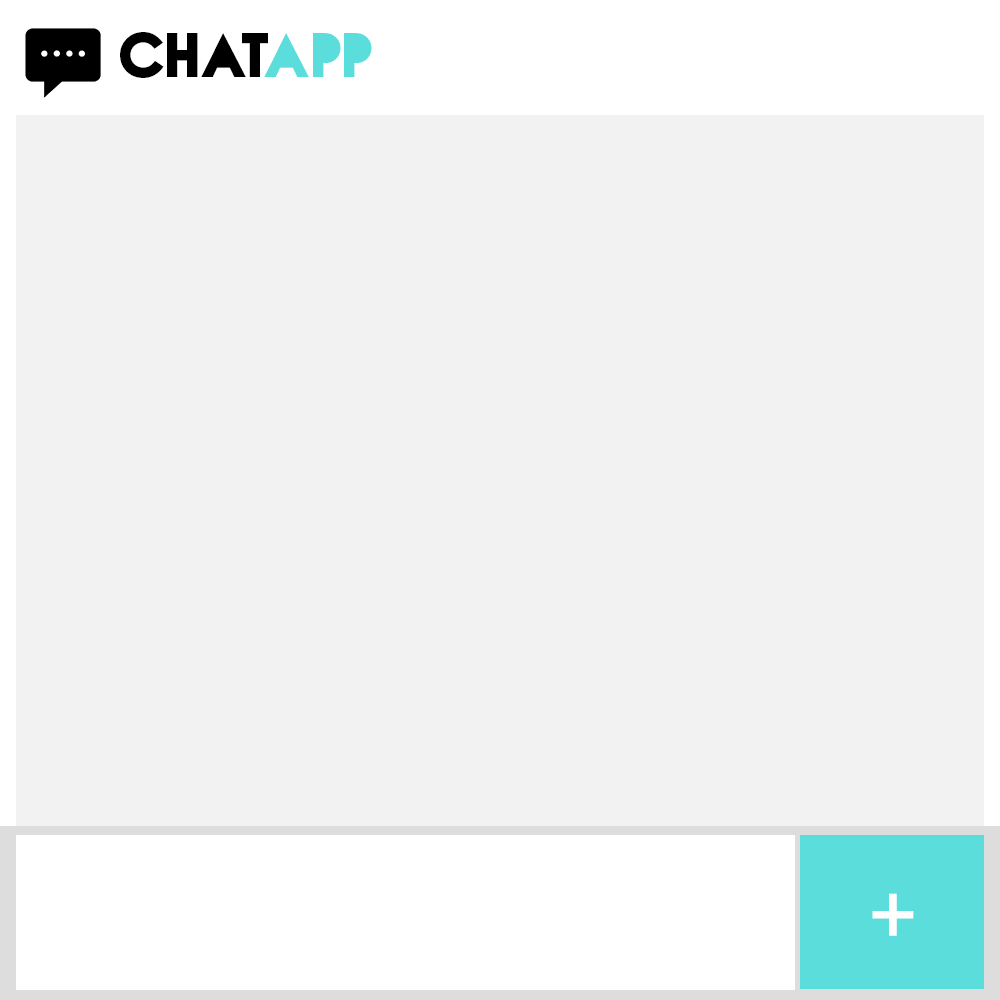
<style>
.page{position:relative;width:1000px;height:1000px;background:#f3f2f2}
.page>*{position:absolute;margin:0}
.t1{font:78px "NovaSOLID-SOLID";letter-spacing:0.075em;color:#000000}
.t2{font:78px "NovaSOLID-SOLID";letter-spacing:0.075em;color:#5bdddb}
.t3{font:79px "MyriadPro-Bold";letter-spacing:0.075em;color:#ffffff}
</style>
<div class="page">
<p class="t1" style="left:120px;top:32px;width:252px;height:46px">CHAT<span class="t2">APP</span></p>
<p class="t3" style="left:872px;top:893px;width:42px;height:43px">+</p>
</div>
